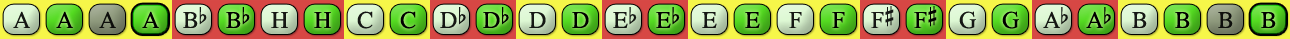
<style>
.page{position:relative;width:1290px;height:39px}
.page>*{position:absolute;margin:0}
.t1{font:24px "OpusChords";color:#000000}
.t2{font:24px "OpusChords";letter-spacing:-0.05em;color:#000000}
</style>
<div class="page">
<p class="t1" style="left:871px;top:6px;width:23px;height:22px;opacity:0.9">F#</p>
<p class="t1" style="left:914px;top:6px;width:23px;height:22px">F#</p>
<p class="t1" style="left:13px;top:11px;width:17px;height:17px;opacity:0.9">A</p>
<p class="t1" style="left:56px;top:11px;width:17px;height:17px">A</p>
<p class="t1" style="left:99px;top:11px;width:17px;height:17px;opacity:0.9">A</p>
<p class="t1" style="left:142px;top:11px;width:17px;height:17px">A</p>
<p class="t1" style="left:183px;top:7px;width:24px;height:21px;opacity:0.9">Bb</p>
<p class="t1" style="left:226px;top:7px;width:24px;height:21px">Bb</p>
<p class="t1" style="left:271px;top:12px;width:17px;height:16px;opacity:0.9">H</p>
<p class="t1" style="left:314px;top:12px;width:17px;height:16px">H</p>
<p class="t1" style="left:357px;top:11px;width:16px;height:18px;opacity:0.9">C</p>
<p class="t1" style="left:400px;top:11px;width:16px;height:18px">C</p>
<p class="t1" style="left:440px;top:7px;width:26px;height:21px;opacity:0.9">Db</p>
<p class="t1" style="left:483px;top:7px;width:26px;height:21px">Db</p>
<p class="t1" style="left:529px;top:12px;width:17px;height:16px;opacity:0.9">D</p>
<p class="t1" style="left:572px;top:12px;width:17px;height:16px">D</p>
<p class="t1" style="left:613px;top:7px;width:24px;height:21px;opacity:0.9">Eb</p>
<p class="t1" style="left:656px;top:7px;width:24px;height:21px">Eb</p>
<p class="t1" style="left:702px;top:12px;width:15px;height:16px;opacity:0.9">E</p>
<p class="t1" style="left:745px;top:12px;width:15px;height:16px">E</p>
<p class="t1" style="left:789px;top:12px;width:13px;height:16px;opacity:0.9">F</p>
<p class="t1" style="left:832px;top:12px;width:13px;height:16px">F</p>
<p class="t1" style="left:959px;top:11px;width:17px;height:18px;opacity:0.9">G</p>
<p class="t1" style="left:1002px;top:11px;width:17px;height:18px">G</p>
<p class="t2" style="left:1043px;top:7px;width:25px;height:21px;opacity:0.9">Ab</p>
<p class="t2" style="left:1086px;top:7px;width:25px;height:21px">Ab</p>
<p class="t1" style="left:1132px;top:12px;width:15px;height:16px;opacity:0.9">B</p>
<p class="t1" style="left:1175px;top:12px;width:15px;height:16px">B</p>
<p class="t1" style="left:1218px;top:12px;width:15px;height:16px;opacity:0.9">B</p>
<p class="t1" style="left:1261px;top:12px;width:15px;height:16px">B</p>
</div>
